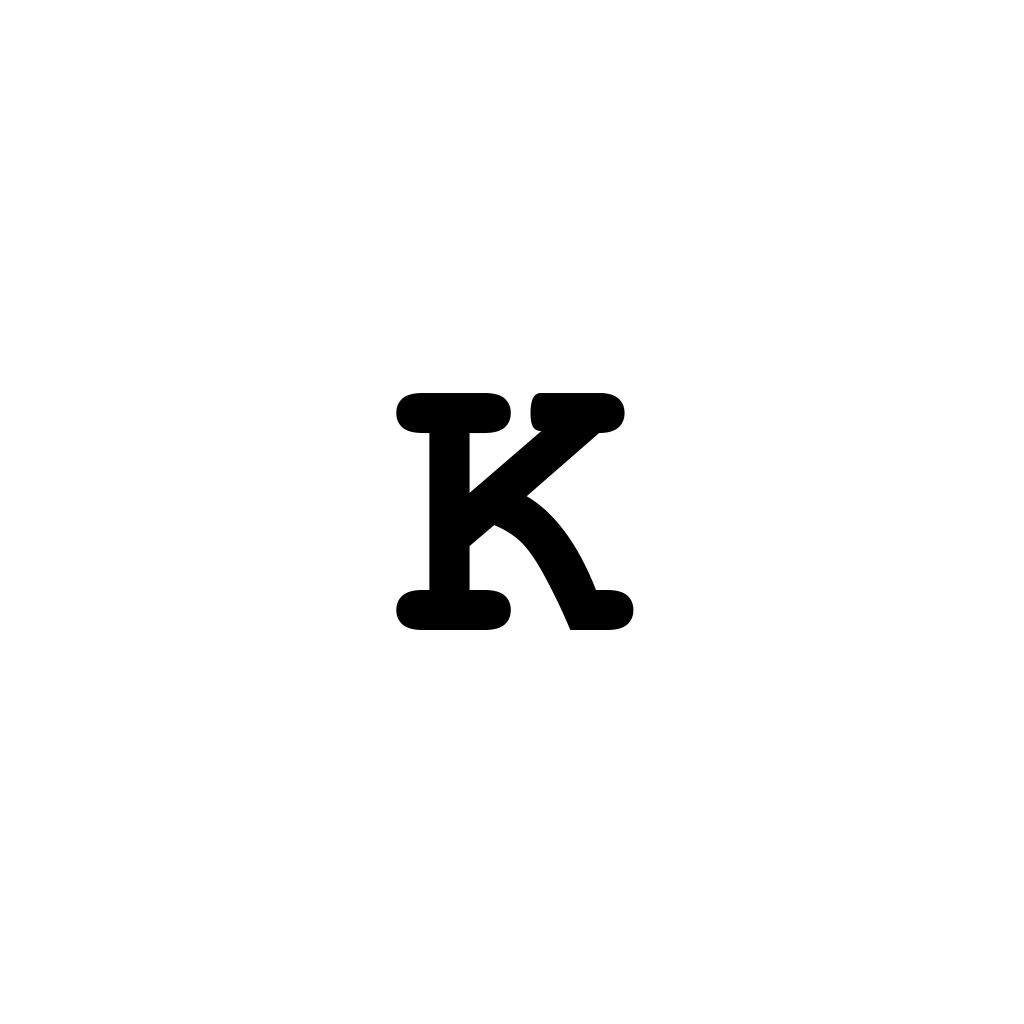
<style>
.page{position:relative;width:1024px;height:1024px;background:#ffffff}
.page>*{position:absolute;margin:0}
.t1{font:400px "CourierNewPS-BoldMT";color:#000000}
</style>
<div class="page">
<p class="t1" style="left:396px;top:393px;width:238px;height:237px">K</p>
</div>
